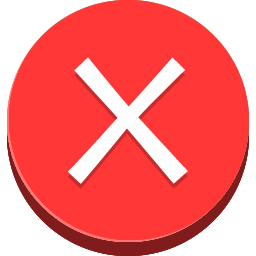
<style>
.page{position:relative;width:256px;height:256px;background:#ff3737}
.page>*{position:absolute;margin:0}
.t1{font:204.2px "LithosPro-Regular";color:#fefefe}
</style>
<div class="page">
<p class="t1" style="left:67px;top:57px;width:121px;height:127px">x</p>
</div>
